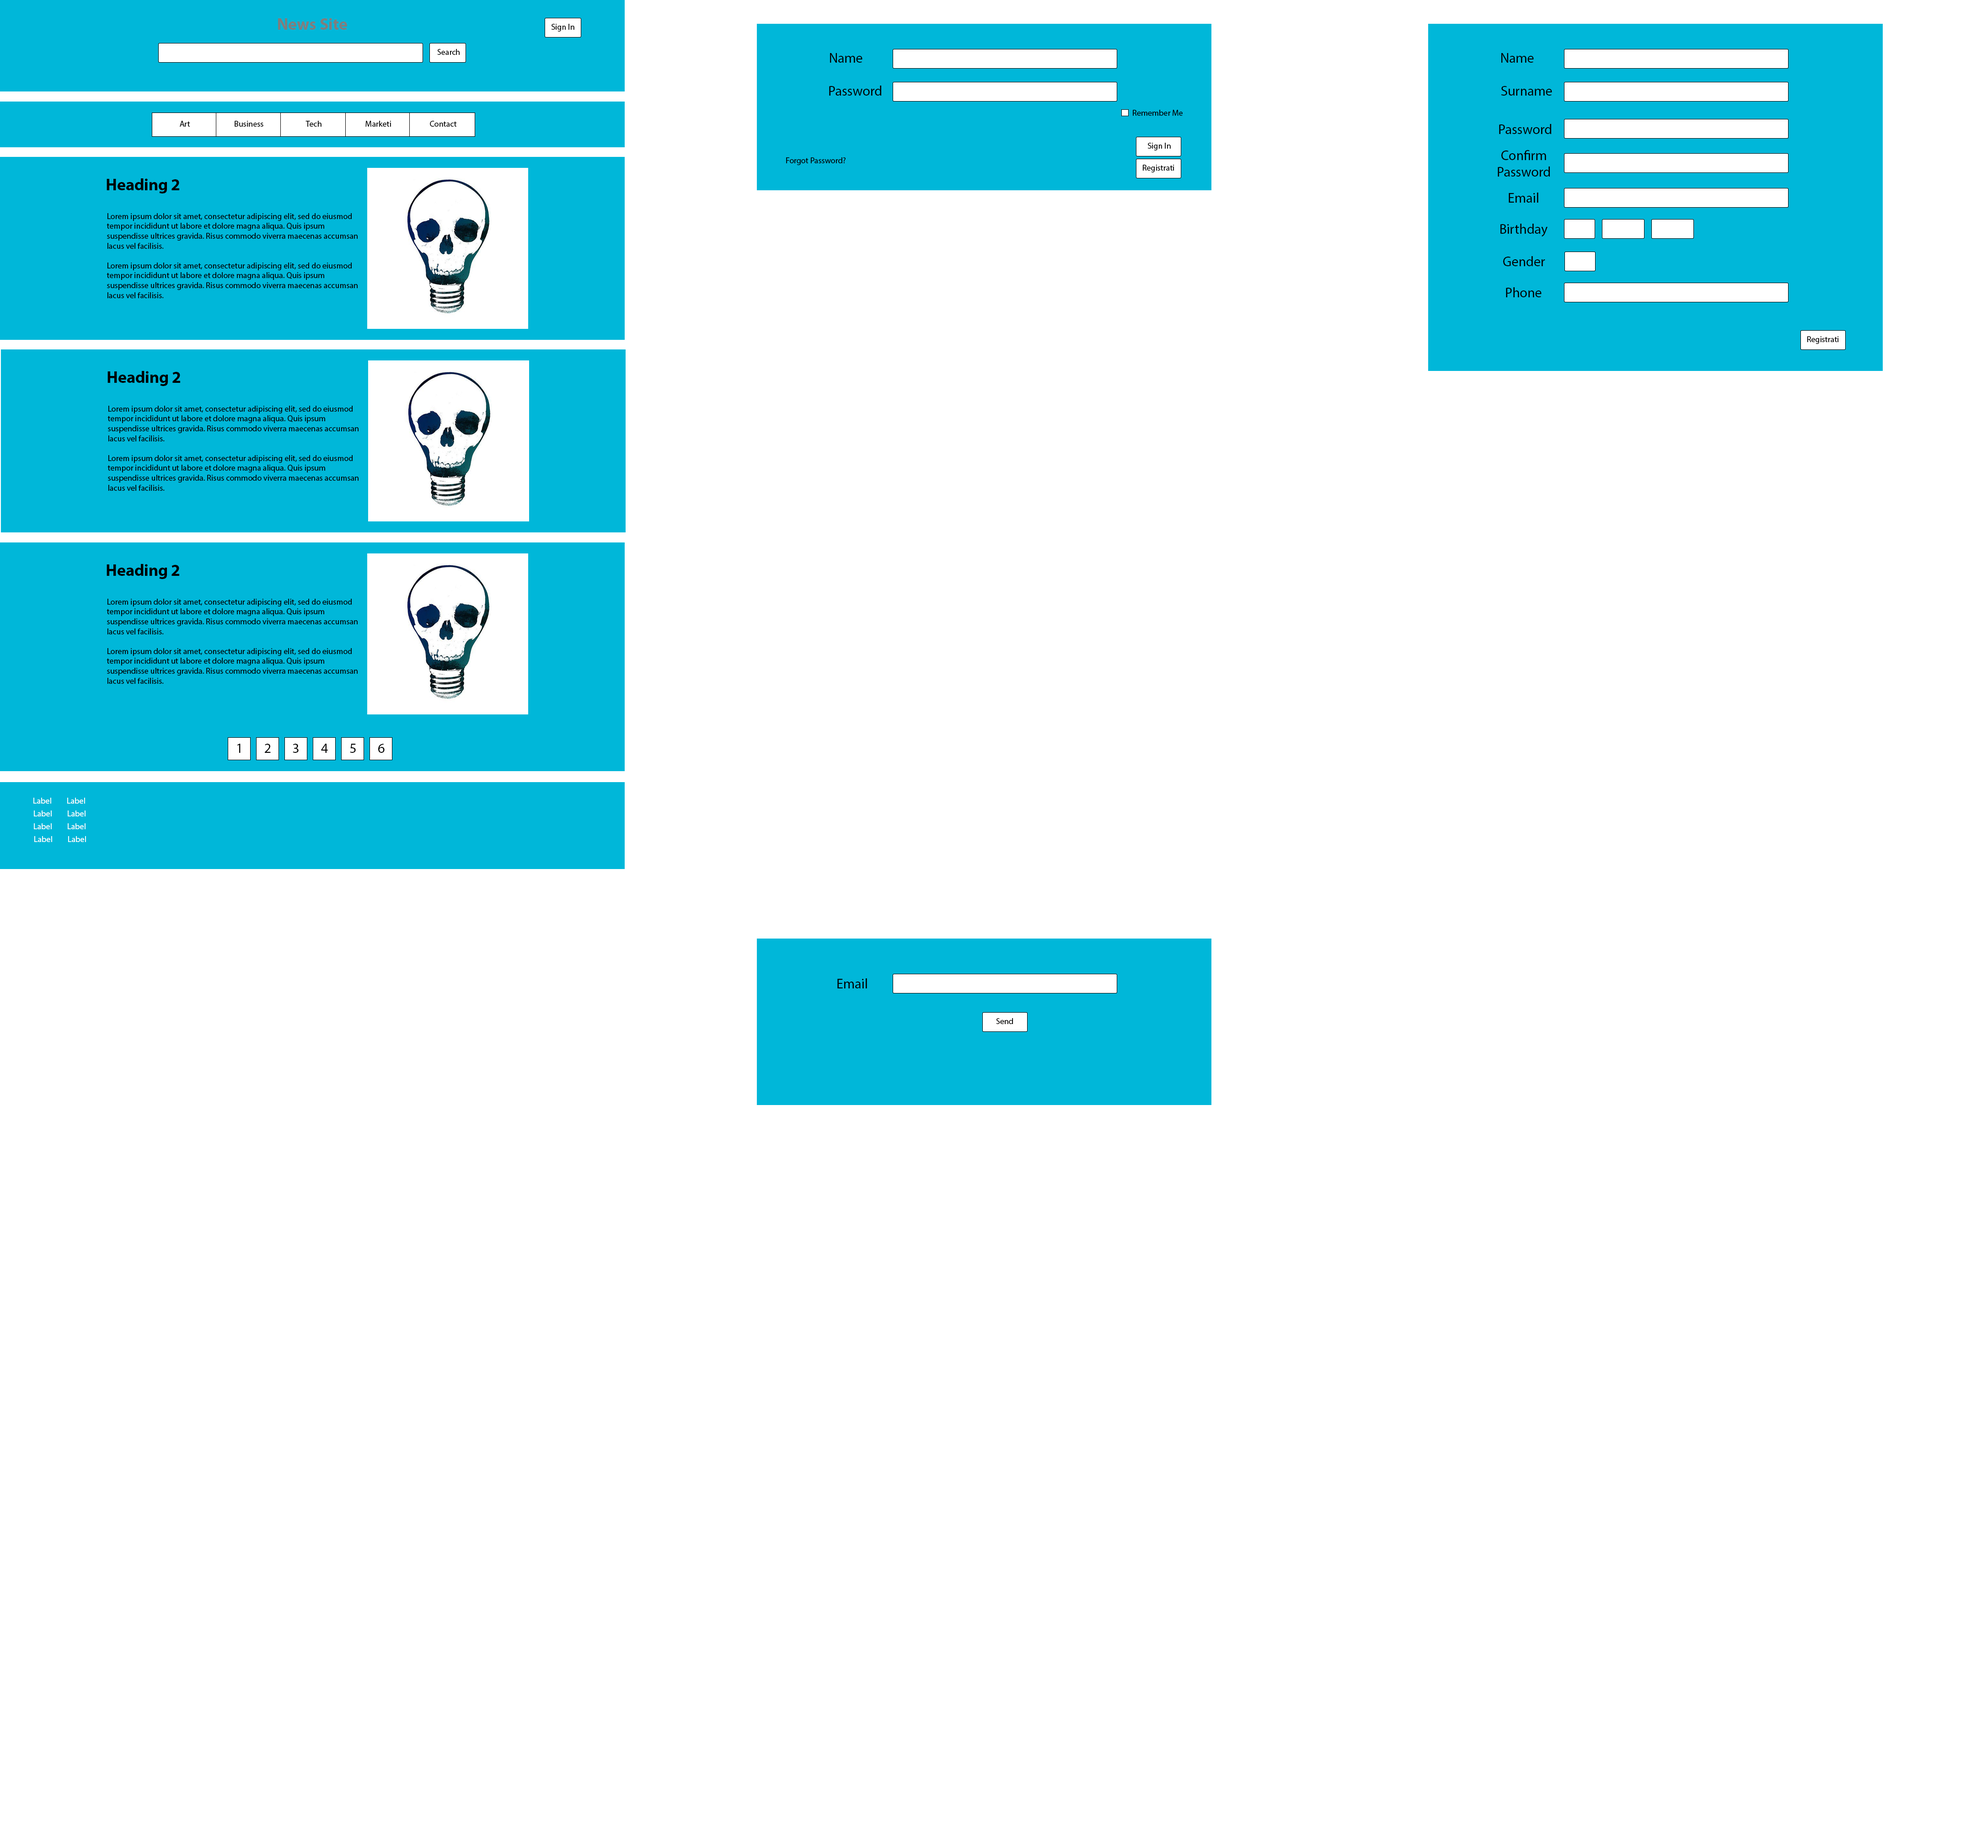
<style>
.page{position:relative;width:1971px;height:1846px;background:#ffffff}
.page>*{position:absolute;margin:0}
.t1{font:16.5px "MyriadPro-Bold";color:#7e7e7e}
.t2{font:8.2px "MyriadPro-Regular";color:#000000}
.t3{font:13.7px "MyriadPro-Regular";color:#000000}
.t4{font:16.5px "MyriadPro-Bold";color:#000000}
.t5{font:8.2px "MyriadPro-Regular";color:#ffffff}
</style>
<div class="page">
<p class="t1" style="left:278px;top:18px;width:69px;height:12px">News Site</p>
<p class="t2" style="left:552px;top:24px;width:22px;height:8px">Sign In</p>
<p class="t2" style="left:437px;top:49px;width:23px;height:6px">Search</p>
<p class="t3" style="left:830px;top:53px;width:33px;height:10px">Name</p>
<p class="t3" style="left:1501px;top:53px;width:33px;height:10px">Name</p>
<p class="t3" style="left:829px;top:86px;width:52px;height:10px">Password</p>
<p class="t3" style="left:1501px;top:86px;width:51px;height:10px">Surname</p>
<p class="t2" style="left:1133px;top:110px;width:50px;height:6px">Remember Me</p>
<p class="t2" style="left:180px;top:121px;width:10px;height:6px">Art</p>
<p class="t2" style="left:235px;top:121px;width:28px;height:6px">Business</p>
<p class="t2" style="left:305px;top:121px;width:16px;height:6px">Tech</p>
<p class="t2" style="left:365px;top:121px;width:26px;height:6px">Marketing</p>
<p class="t2" style="left:430px;top:121px;width:27px;height:6px">Contact</p>
<p class="t3" style="left:1499px;top:124px;width:52px;height:10px">Password</p>
<p class="t2" style="left:1148px;top:143px;width:23px;height:7px">Sign In</p>
<p class="t2" style="left:786px;top:157px;width:60px;height:8px">Forgot Password?</p>
<p class="t3" style="left:1498px;top:150px;width:52px;height:27px;text-align:center">Confirm Password</p>
<p class="t2" style="left:1143px;top:165px;width:31px;height:7px">Registration</p>
<p class="t4" style="left:107px;top:178px;width:72px;height:15px">Heading 2</p>
<p class="t3" style="left:1509px;top:193px;width:29px;height:10px">Email</p>
<p class="t2" style="left:107px;top:213px;width:251px;height:85px">Lorem ipsum dolor sit amet, consectetur adipiscing elit, sed do eiusmod tempor incididunt ut labore et dolore magna aliqua. Quis ipsum suspendisse ultrices gravida. Risus commodo viverra maecenas accumsan lacus vel facilisis. <br><br>Lorem ipsum dolor sit amet, consectetur adipiscing elit, sed do eiusmod tempor incididunt ut labore et dolore magna aliqua. Quis ipsum suspendisse ultrices gravida. Risus commodo viverra maecenas accumsan lacus vel facilisis.</p>
<p class="t3" style="left:1500px;top:224px;width:48px;height:13px">Birthday</p>
<p class="t3" style="left:1503px;top:256px;width:42px;height:10px">Gender</p>
<p class="t3" style="left:1506px;top:287px;width:36px;height:10px">Phone</p>
<p class="t2" style="left:1807px;top:336px;width:32px;height:8px">Registration</p>
<p class="t4" style="left:107px;top:371px;width:73px;height:15px">Heading 2</p>
<p class="t2" style="left:107px;top:406px;width:252px;height:85px">Lorem ipsum dolor sit amet, consectetur adipiscing elit, sed do eiusmod tempor incididunt ut labore et dolore magna aliqua. Quis ipsum suspendisse ultrices gravida. Risus commodo viverra maecenas accumsan lacus vel facilisis. <br><br>Lorem ipsum dolor sit amet, consectetur adipiscing elit, sed do eiusmod tempor incididunt ut labore et dolore magna aliqua. Quis ipsum suspendisse ultrices gravida. Risus commodo viverra maecenas accumsan lacus vel facilisis.</p>
<p class="t4" style="left:107px;top:564px;width:72px;height:15px">Heading 2</p>
<p class="t2" style="left:107px;top:599px;width:251px;height:85px">Lorem ipsum dolor sit amet, consectetur adipiscing elit, sed do eiusmod tempor incididunt ut labore et dolore magna aliqua. Quis ipsum suspendisse ultrices gravida. Risus commodo viverra maecenas accumsan lacus vel facilisis. <br><br>Lorem ipsum dolor sit amet, consectetur adipiscing elit, sed do eiusmod tempor incididunt ut labore et dolore magna aliqua. Quis ipsum suspendisse ultrices gravida. Risus commodo viverra maecenas accumsan lacus vel facilisis.</p>
<p class="t3" style="left:237px;top:744px;width:4px;height:9px">1</p>
<p class="t3" style="left:265px;top:744px;width:6px;height:9px">2</p>
<p class="t3" style="left:293px;top:744px;width:6px;height:9px">3</p>
<p class="t3" style="left:321px;top:744px;width:7px;height:9px">4</p>
<p class="t3" style="left:350px;top:744px;width:6px;height:9px">5</p>
<p class="t3" style="left:378px;top:744px;width:7px;height:9px">6</p>
<p class="t5" style="left:33px;top:798px;width:18px;height:6px">Label</p>
<p class="t5" style="left:67px;top:798px;width:18px;height:6px">Label</p>
<p class="t5" style="left:34px;top:810px;width:18px;height:6px">Label</p>
<p class="t5" style="left:68px;top:810px;width:18px;height:6px">Label</p>
<p class="t5" style="left:34px;top:823px;width:18px;height:6px">Label</p>
<p class="t5" style="left:68px;top:823px;width:18px;height:6px">Label</p>
<p class="t5" style="left:34px;top:836px;width:18px;height:6px">Label</p>
<p class="t5" style="left:68px;top:836px;width:18px;height:6px">Label</p>
<p class="t3" style="left:837px;top:978px;width:30px;height:10px">Email</p>
<p class="t2" style="left:996px;top:1018px;width:17px;height:6px">Send</p>
</div>
